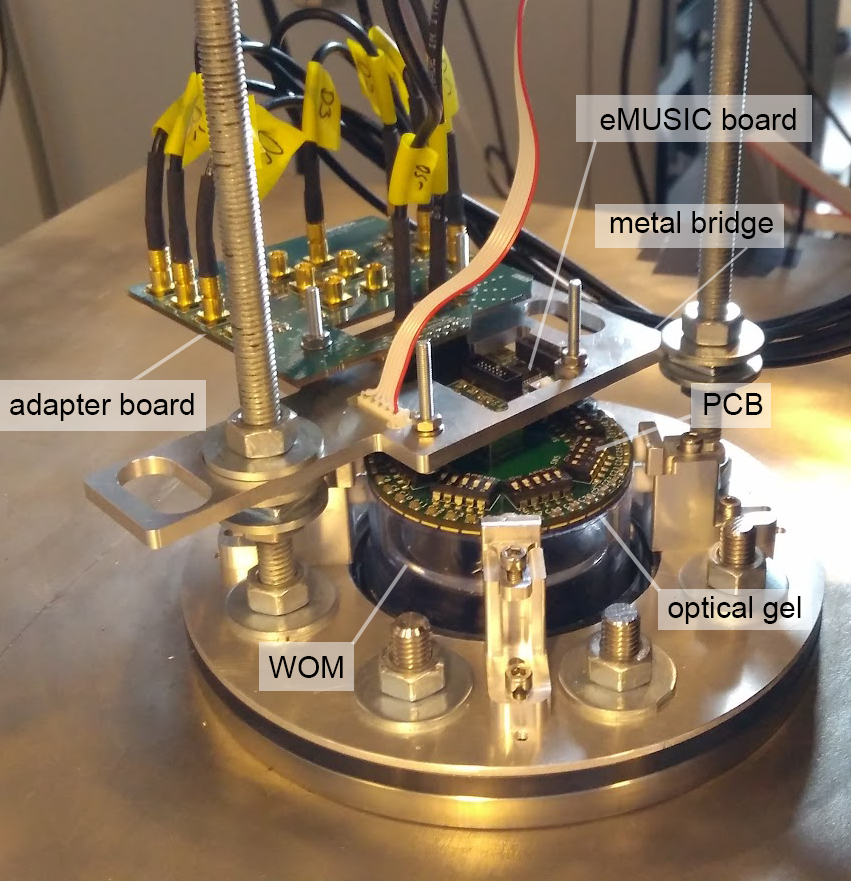
<style>
.page{position:relative;width:851px;height:881px}
.page>*{position:absolute;margin:0}
.t1{font:30px "ArialMT";color:#000000}
.t2{font:29.9px "ArialMT";color:#000000}
</style>
<div class="page">
<p class="t1" style="left:600px;top:108px;width:196px;height:22px">eMUSIC board</p>
<p class="t2" style="left:610px;top:211px;width:163px;height:28px">metal bridge</p>
<p class="t1" style="left:10px;top:393px;width:184px;height:28px">adapter board</p>
<p class="t1" style="left:704px;top:393px;width:59px;height:22px">PCB</p>
<p class="t1" style="left:668px;top:596px;width:133px;height:28px">optical gel</p>
<p class="t1" style="left:268px;top:656px;width:75px;height:22px">WOM</p>
</div>
